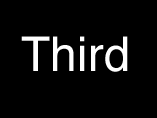
<style>
.page{position:relative;width:157px;height:118px;background:#000000}
.page>*{position:absolute;margin:0}
.t1{font:48px "Helvetica";color:#ffffff}
</style>
<div class="page">
<p class="t1" style="left:21px;top:36px;width:107px;height:36px">Third</p>
</div>
